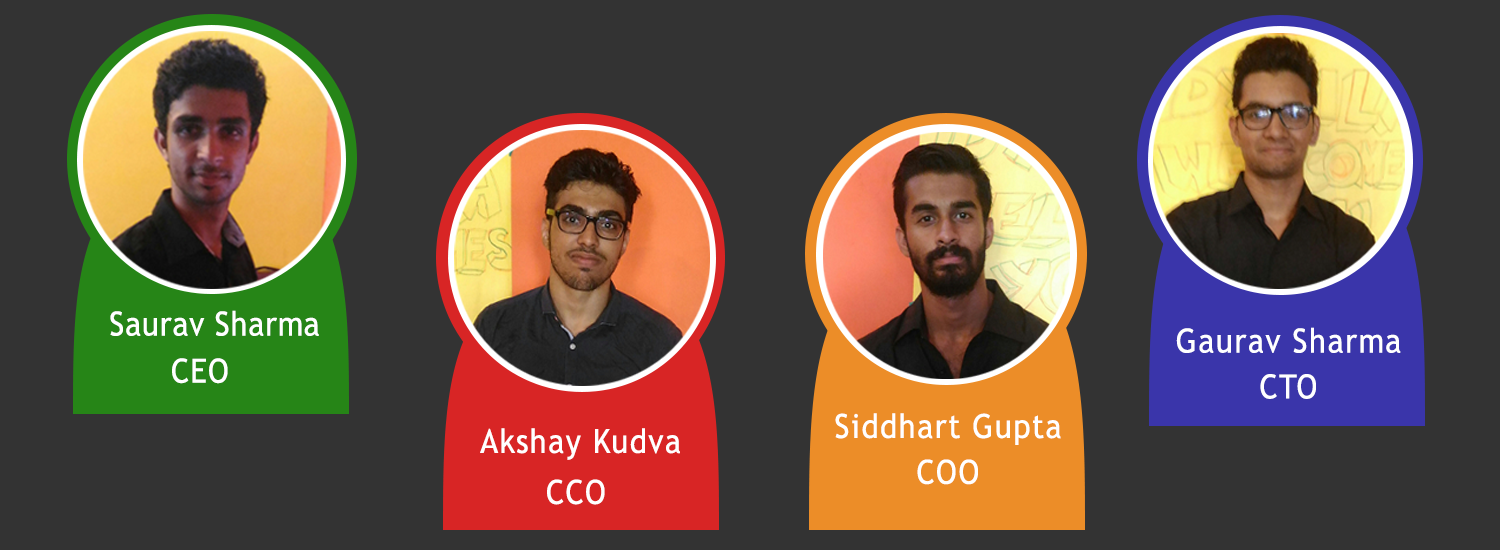
<style>
.page{position:relative;width:1500px;height:550px;background:#333333}
.page>*{position:absolute;margin:0}
.t1{font:33.3px "TrebuchetMS";letter-spacing:0.025em;color:#ffffff;scale:0.92 1}
.t2{font:33.3px/45.8px "TrebuchetMS";letter-spacing:0.05em;color:#ffffff;scale:0.92 1}
.t3{font:33.3px "TrebuchetMS";letter-spacing:0.05em;color:#ffffff;scale:0.92 1}
</style>
<div class="page">
<p class="t1" style="left:110px;top:310px;width:209px;height:26px">Saurav Sharma</p>
<p class="t2" style="left:1176px;top:327px;width:225px;height:72px;text-align:center">Gaurav Sharma<br>CTO</p>
<p class="t3" style="left:172px;top:358px;width:56px;height:26px">CEO</p>
<p class="t2" style="left:835px;top:413px;width:226px;height:72px;text-align:center">Siddhart Gupta<br>COO</p>
<p class="t3" style="left:480px;top:428px;width:200px;height:32px">Akshay Kudva</p>
<p class="t3" style="left:547px;top:479px;width:58px;height:26px">CCO</p>
</div>
